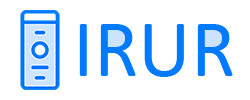
<style>
.page{position:relative;width:250px;height:100px;background:#ffffff}
.page>*{position:absolute;margin:0}
.t1{font:82px "Calibri";color:#007aff}
</style>
<div class="page">
<p class="t1" style="left:79px;top:24px;width:154px;height:53px">IRUR</p>
</div>
